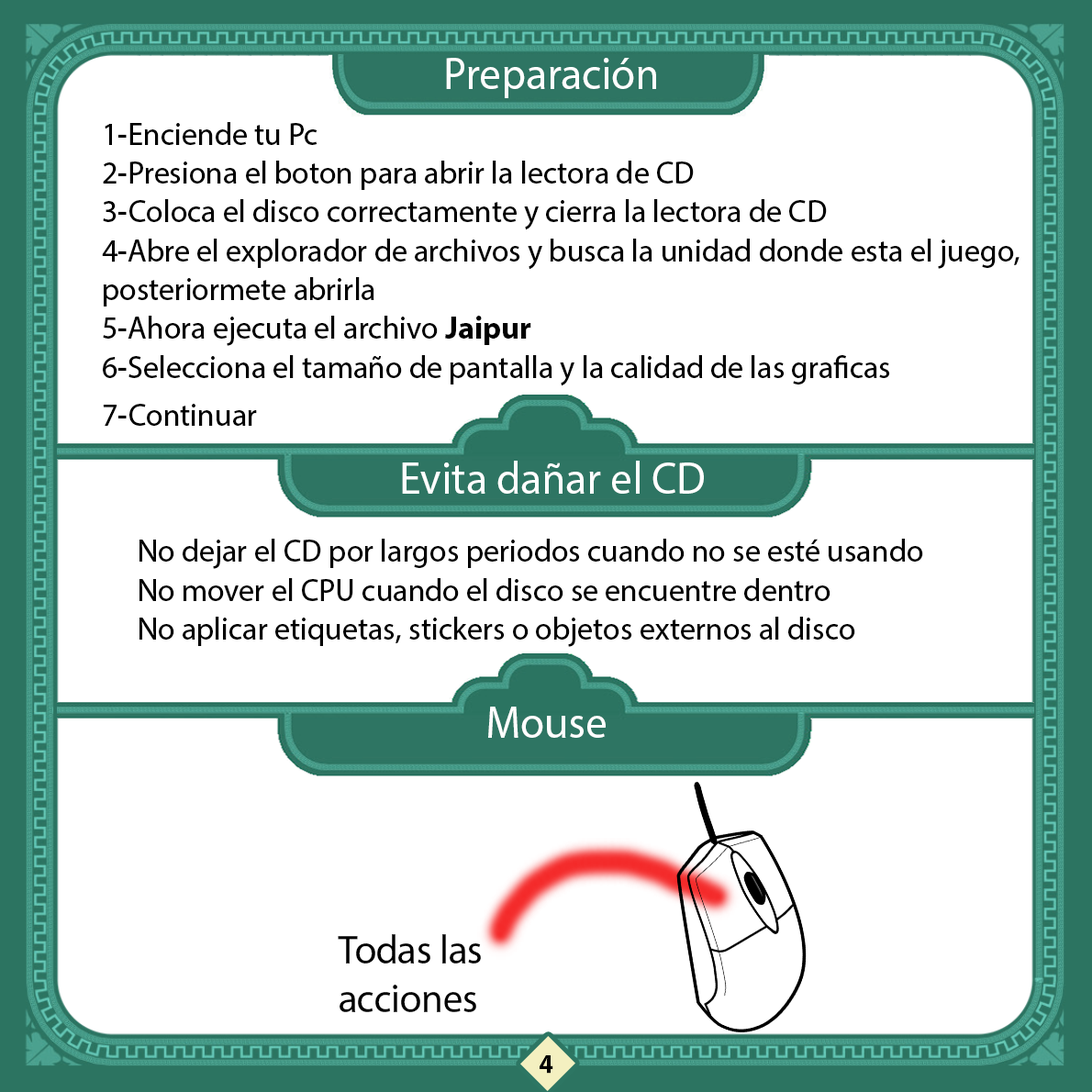
<style>
.page{position:relative;width:1092px;height:1092px;background:#ffffff}
.page>*{position:absolute;margin:0}
.t1{font:45.3px "MyriadHebrew-Regular";color:#ffffff;scale:0.96 1}
.t2{font:32.4px "MyriadHebrew-Regular";color:#000000;scale:0.96 1}
.t3{font:32.4px "MyriadHebrew-Bold";color:#000000;scale:0.96 1}
.t4{font:40.2px "MyriadHebrew-Regular";color:#000000;scale:0.96 1}
.t5{font:25.9px "MyriadHebrew-Bold";color:#000000}
</style>
<div class="page">
<p class="t1" style="left:446px;top:58px;width:210px;height:40px">Preparación</p>
<p class="t2" style="left:102px;top:122px;width:917px;height:305px;text-align:right">1-Enciende tu Pc<br>2-Presiona el boton para abrir la lectora de CD<br>3-Coloca el disco correctamente y cierra la lectora de CD<br>4-Abre el explorador de archivos y busca la unidad donde esta el juego, posteriormete abrirla<br>5-Ahora ejecuta el archivo <span class="t3">Jaipur <br></span>6-Selecciona el tamaño de pantalla y la calidad de las graficas<br>7-Continuar</p>
<p class="t1" style="left:402px;top:461px;width:302px;height:33px">Evita dañar el CD</p>
<p class="t2" style="left:139px;top:539px;width:784px;height:108px;text-align:right">No dejar el CD por largos periodos cuando no se esté usando<br>No mover el CPU cuando el disco se encuentre dentro<br>No aplicar etiquetas, stickers o objetos externos al disco</p>
<p class="t1" style="left:488px;top:707px;width:118px;height:31px">Mouse</p>
<p class="t4" style="left:338px;top:934px;width:143px;height:78px">Todas las acciones</p>
<p class="t5" style="left:540px;top:1055px;width:13px;height:19px">4</p>
</div>
